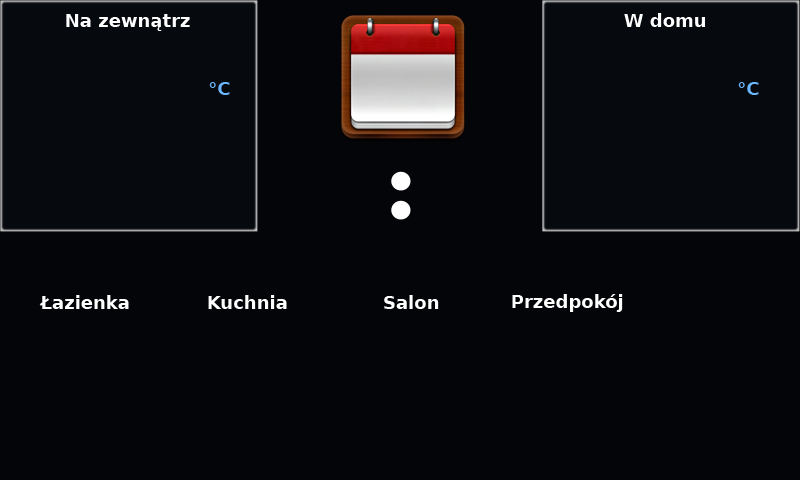
<style>
.page{position:relative;width:800px;height:480px;background:#040508}
.page>*{position:absolute;margin:0}
.t1{font:18px "DejaVuSans-Bold";color:#ffffff}
.t2{font:18px "DejaVuSans-Bold";color:#6ab6ff}
</style>
<div class="page">
<p class="t1" style="left:66px;top:14px;width:124px;height:17px">Na zewnątrz</p>
<p class="t1" style="left:624px;top:13px;width:81px;height:14px">W domu</p>
<p class="t2" style="left:209px;top:82px;width:21px;height:13px">°C</p>
<p class="t2" style="left:738px;top:82px;width:21px;height:13px">°C</p>
<p class="t1" style="left:512px;top:294px;width:111px;height:18px">Przedpokój</p>
<p class="t1" style="left:39px;top:295px;width:90px;height:14px">Łazienka</p>
<p class="t1" style="left:208px;top:295px;width:79px;height:14px">Kuchnia</p>
<p class="t1" style="left:384px;top:295px;width:55px;height:14px">Salon</p>
</div>
